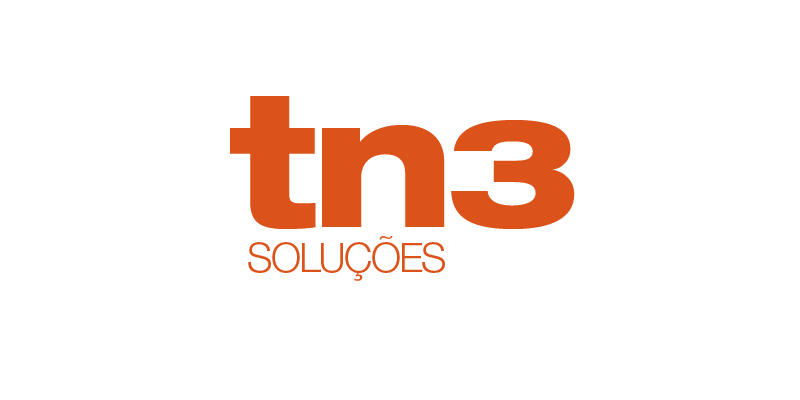
<style>
.page{position:relative;width:800px;height:400px;background:#ffffff}
.page>*{position:absolute;margin:0}
.t1{font:182.9px "HelveticaNeueLTPro-HvEx";letter-spacing:-0.05em;color:#db531a}
.t2{font:152.4px "HelveticaNeueLTPro-HvEx";letter-spacing:-0.05em;color:#db531a}
.t3{font:40.6px "HelveticaNeueLTPro-Lt";letter-spacing:-0.05em;color:#db531a}
</style>
<div class="page">
<p class="t1" style="left:230px;top:96px;width:345px;height:133px">tn<span class="t2">3</span></p>
<p class="t3" style="left:248px;top:236px;width:197px;height:45px">SOLUÇÕES</p>
</div>
